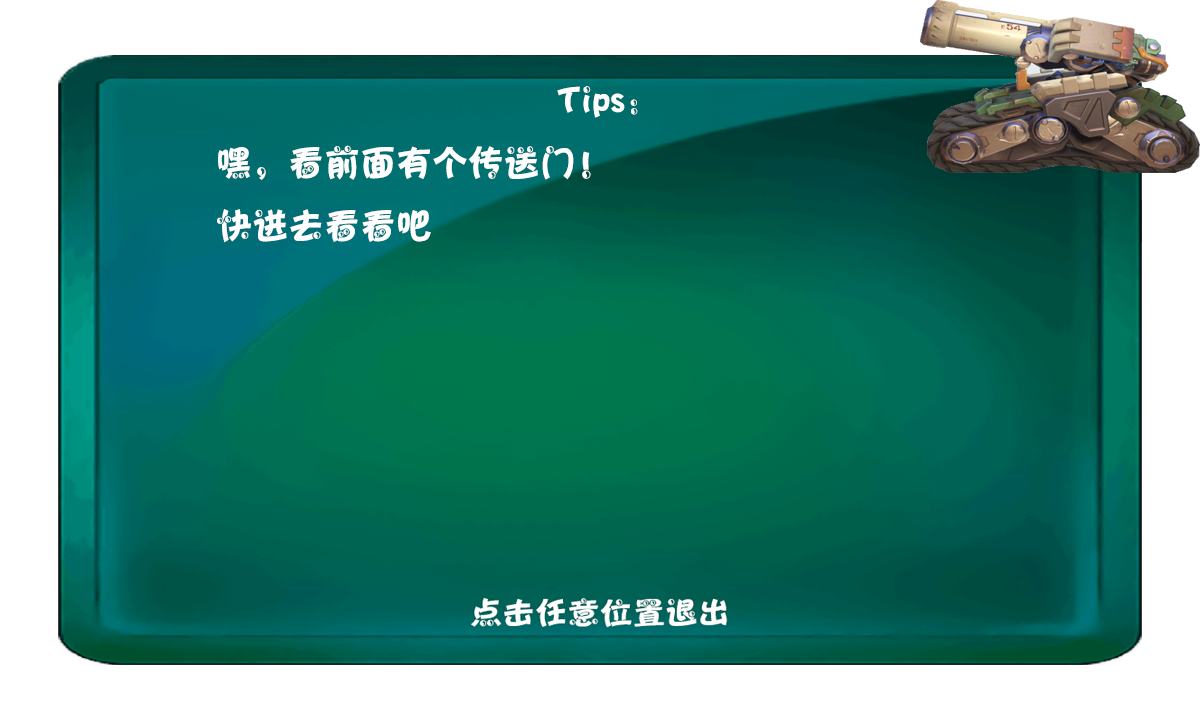
<style>
.page{position:relative;width:1200px;height:720px;background:#ffffff}
.page>*{position:absolute;margin:0}
.t1{font:36px "Jtaiji";color:#ffffff}
</style>
<div class="page">
<p class="t1" style="left:217px;top:86px;width:421px;height:157px;text-align:center">Tips:<br>       嘿，看前面有个传送门！<br>      快进去看看吧</p>
</div>
